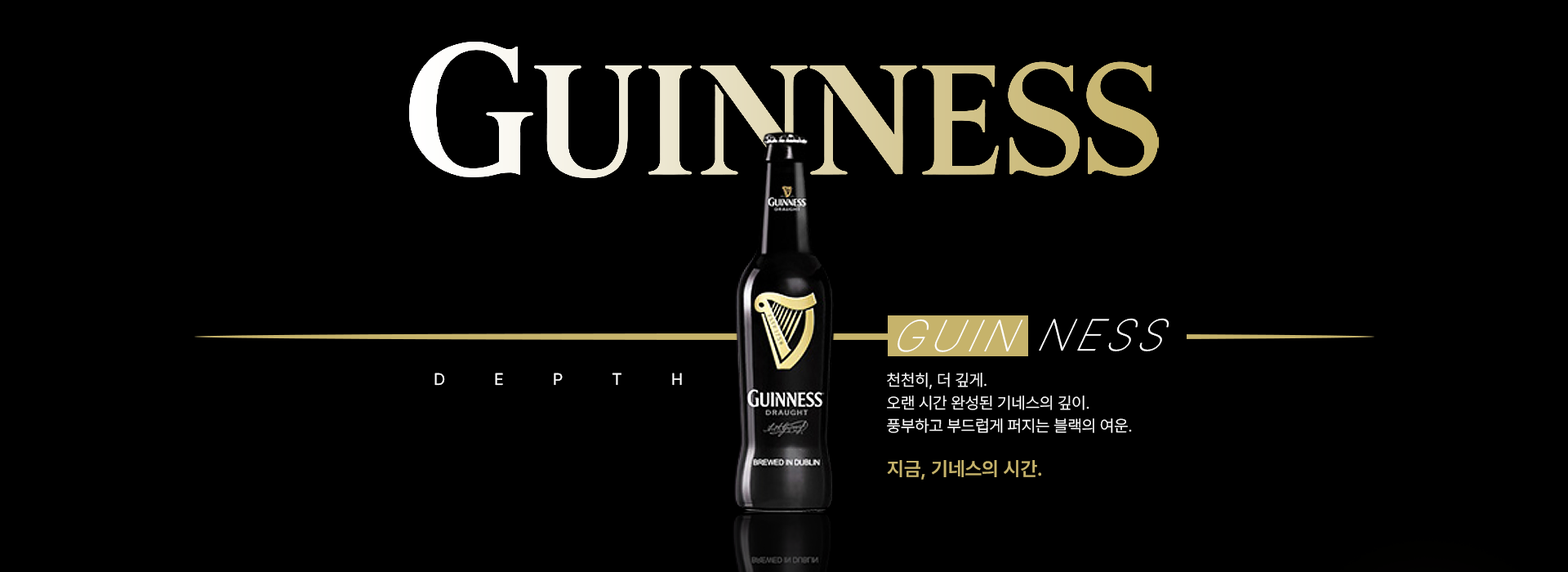
<style>
.page{position:relative;width:1568px;height:572px;background:#000000}
.page>*{position:absolute;margin:0}
.t1{font:49px "Pretendard-Thin";letter-spacing:0.12em;color:#ffffff;text-transform:uppercase;scale:0.91 1}
.t2{font:16.3px "Pretendard-Regular";letter-spacing:3em;color:#ffffff;text-transform:uppercase}
.t3{font:16.3px/22.9px "Pretendard-Light";color:#ffffff;text-transform:uppercase}
.t4{font:19.6px "Pretendard-SemiBold";color:#c6b36b;text-transform:uppercase}
</style>
<div class="page">
<p class="t1" style="left:1039px;top:318px;width:130px;height:33px">ness</p>
<p class="t1" style="left:898px;top:318px;width:125px;height:34px">guin</p>
<p class="t2" style="left:434px;top:372px;width:248px;height:13px">DEPTH</p>
<p class="t3" style="left:887px;top:372px;width:245px;height:61px">천천히, 더 깊게.<br>오랜 시간 완성된 기네스의 깊이.<br>풍부하고 부드럽게 퍼지는 블랙의 여운.</p>
<p class="t4" style="left:887px;top:460px;width:154px;height:19px">지금, 기네스의 시간.</p>
</div>
